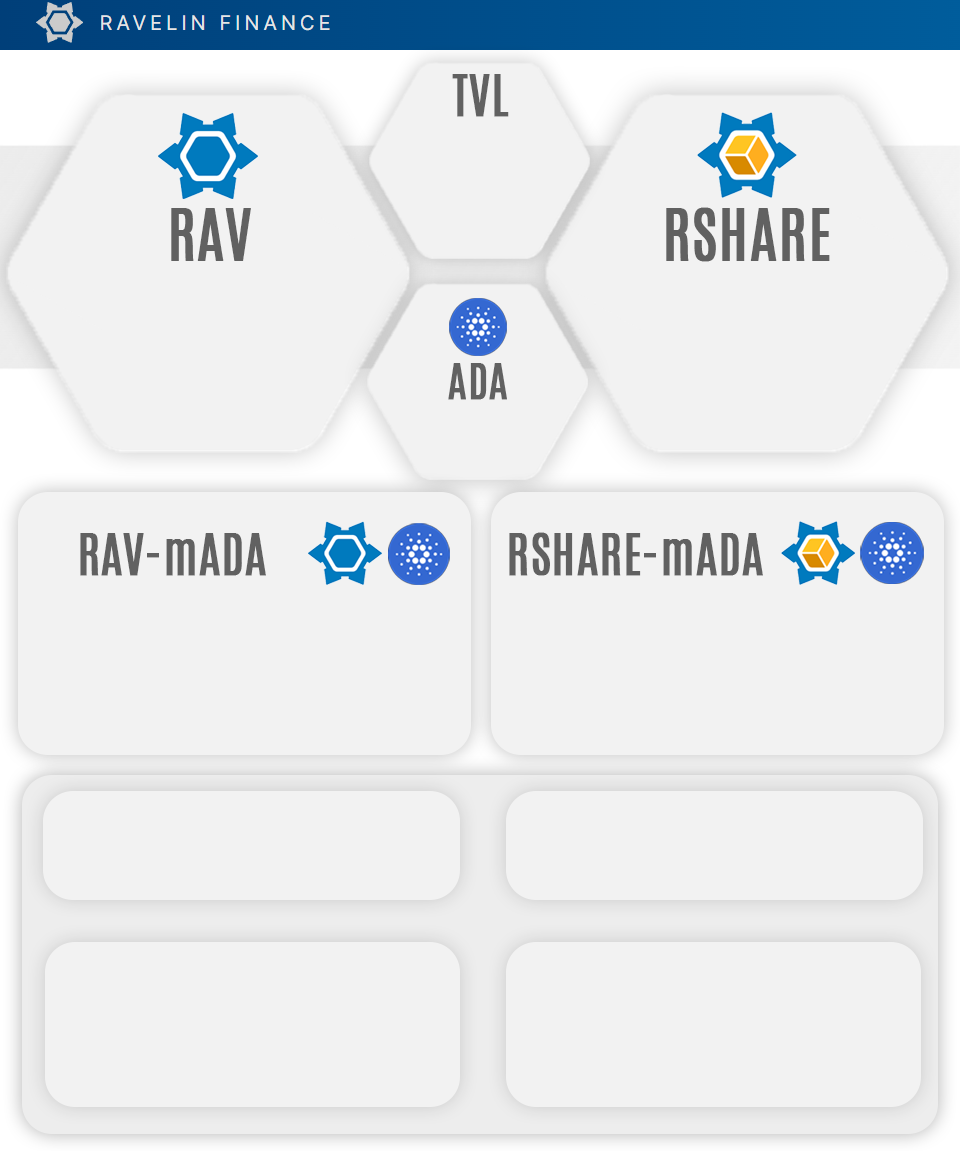
<style>
.page{position:relative;width:960px;height:1151px;background:#f2f2f2}
.page>*{position:absolute;margin:0}
.t1{font:48px "Antonio-Regular";color:#616161;font-weight:bold}
.t2{font:60px "Antonio-Regular";color:#616161;font-weight:bold}
.t3{font:42.3px "Antonio-Regular";color:#616161;font-weight:bold}
</style>
<div class="page">
<p class="t1" style="left:452px;top:74px;width:57px;height:43px">TVL</p>
<p class="t2" style="left:171px;top:208px;width:80px;height:53px">RAV</p>
<p class="t2" style="left:666px;top:207px;width:164px;height:55px">RSHARE</p>
<p class="t3" style="left:448px;top:363px;width:59px;height:37px">ADA</p>
<p class="t1" style="left:80px;top:533px;width:186px;height:43px">RAV-mADA</p>
<p class="t1" style="left:509px;top:532px;width:254px;height:44px">RSHARE-mADA</p>
</div>
